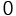
<style>
.page{position:relative;width:16px;height:16px;background:#ffffff}
.page>*{position:absolute;margin:0}
.t1{font:20px "DengXian";color:#000000}
</style>
<div class="page">
<p class="t1" style="left:3px;top:1px;width:10px;height:14px">0</p>
</div>
